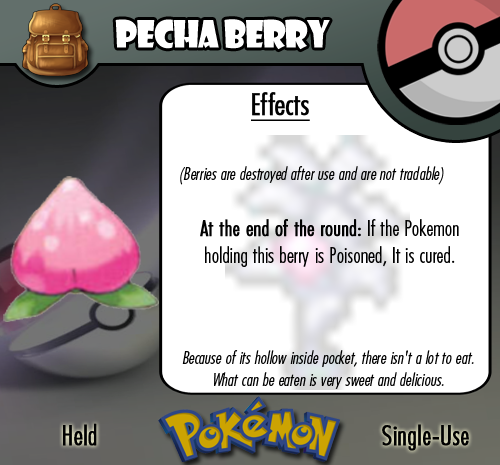
<style>
.page{position:relative;width:500px;height:465px;background:#ffffff}
.page>*{position:absolute;margin:0}
.t1{font:36.7px "ShowcardGothic-Reg";letter-spacing:-0.025em;color:#ffffff;scale:0.91 1}
.t2{font:22.2px "FuturaCondensedBQ-Light";color:#010101}
.t3{font:27.8px "FuturaCondensedBQ-Light";color:#010101;font-weight:bold}
.t4{font:30.6px "FuturaCondensedBQ-Light";color:#010101;font-weight:bold;text-decoration:underline}
.t5{font:18.1px "FuturaCondensedBQ-Light";color:#010101;font-style:italic}
.t6{font:22.2px "FuturaCondensedBQ-Light";color:#010101;font-weight:bold}
</style>
<div class="page">
<p class="t1" style="left:115px;top:19px;width:215px;height:31px">Pecha Berry</p>
<p class="t2" style="left:180px;top:92px;width:279px;height:175px"><span class="t3">  </span><span class="t4">Effects<br><br><br></span><span class="t5">(Berries are destroyed after use and are not tradable)<br><br><br><br></span><span class="t6">At the end of the round:</span> If the Pokemon holding this berry is Poisoned, It is cured.</p>
<p class="t5" style="left:182px;top:350px;width:292px;height:39px;text-align:center">Because of its hollow inside pocket, there isn't a lot to eat. What can be eaten is very sweet and delicious.</p>
<p class="t3" style="left:63px;top:423px;width:34px;height:23px">Held</p>
<p class="t3" style="left:382px;top:424px;width:87px;height:27px">Single-Use</p>
</div>
